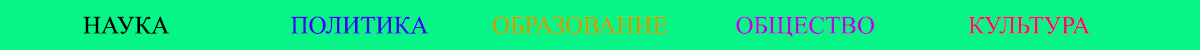
<style>
.page{position:relative;width:1200px;height:50px;background:#07f487}
.page>*{position:absolute;margin:0}
.t1{font:25px "TimesNewRomanPSMT";color:#000000}
.t2{font:25px "TimesNewRomanPSMT";color:#3308e9}
.t3{font:25px "TimesNewRomanPSMT";color:#b4a609}
.t4{font:25px "TimesNewRomanPSMT";color:#a312df}
.t5{font:25px "TimesNewRomanPSMT";color:#eb1072}
</style>
<div class="page">
<p class="t1" style="left:83px;top:16px;width:87px;height:18px">НАУКА</p>
<p class="t2" style="left:290px;top:16px;width:139px;height:18px">ПОЛИТИКА</p>
<p class="t3" style="left:492px;top:16px;width:176px;height:18px">ОБРАЗОВАНИЕ</p>
<p class="t4" style="left:736px;top:16px;width:139px;height:23px">ОБЩЕСТВО</p>
<p class="t5" style="left:968px;top:16px;width:122px;height:18px">КУЛЬТУРА</p>
</div>
